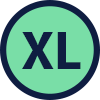
<style>
.page{position:relative;width:100px;height:100px;background:#79dea7}
.page>*{position:absolute;margin:0}
.t1{font:54.2px "MyriadPro-Bold";color:#0f1d41}
</style>
<div class="page">
<p class="t1" style="left:22px;top:32px;width:59px;height:37px">XL</p>
</div>
